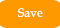
<style>
.page{position:relative;width:60px;height:28px;background:#ff9900}
.page>*{position:absolute;margin:0}
.t1{font:12px "BookAntiqua";color:#ffffff}
</style>
<div class="page">
<p class="t1" style="left:18px;top:8px;width:25px;height:9px">Save</p>
</div>
